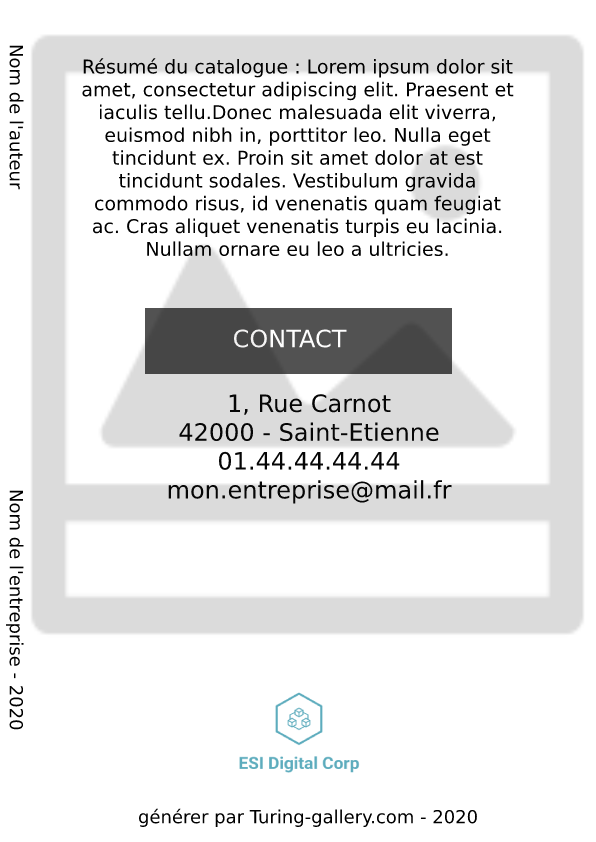
<style>
.page{position:relative;width:596px;height:842px;background:#ffffff}
.page>*{position:absolute;margin:0}
.t1{font:18px "DejaVuSans";color:#000000}
.t2{font:19px "DejaVuSans";color:#000000}
.t3{font:24px "DejaVuSans";color:#fefdfd}
.t4{font:24px "DejaVuSans";color:#060606}
</style>
<div class="page">
<p class="t1" style="left:9px;top:45px;width:15px;height:145px;rotate:90deg">Nom de l'auteur</p>
<p class="t2" style="left:82px;top:58px;width:432px;height:199px;text-align:center">Résumé du catalogue : Lorem ipsum dolor sit amet, consectetur adipiscing elit. Praesent et iaculis tellu.Donec malesuada elit viverra, euismod nibh in, porttitor leo. Nulla eget tincidunt ex. Proin sit amet dolor at est tincidunt sodales. Vestibulum gravida commodo risus, id venenatis quam feugiat ac. Cras aliquet venenatis turpis eu lacinia. Nullam ornare eu leo a ultricies.</p>
<p class="t3" style="left:233px;top:329px;width:114px;height:19px">CONTACT</p>
<p class="t4" style="left:168px;top:394px;width:284px;height:110px;text-align:center">1, Rue Carnot<br>42000 - Saint-Etienne<br>01.44.44.44.44<br>mon.entreprise@mail.fr</p>
<p class="t1" style="left:6px;top:490px;width:18px;height:240px;rotate:90deg">Nom de l'entreprise - 2020</p>
<p class="t1" style="left:138px;top:808px;width:339px;height:19px">générer par Turing-gallery.com - 2020</p>
</div>
